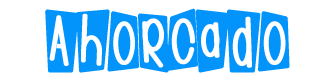
<style>
.page{position:relative;width:320px;height:80px;background:#ffffff}
.page>*{position:absolute;margin:0}
.t1{font:81.9px "KlinkOMite";color:#0294fb;scale:1.11 1}
</style>
<div class="page">
<p class="t1" style="left:45px;top:8px;width:245px;height:65px">Ahorcado</p>
</div>
